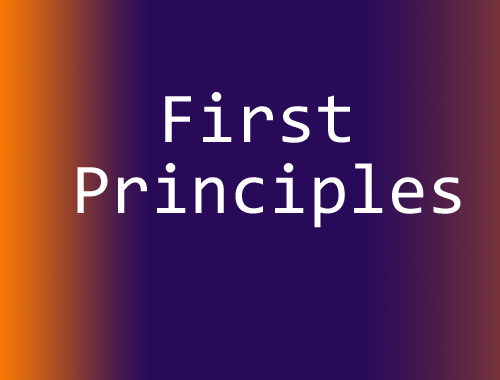
<style>
.page{position:relative;width:500px;height:380px;background:#290a59}
.page>*{position:absolute;margin:0}
.t1{font:71.7px "Consolas";color:#ffffff}
</style>
<div class="page">
<p class="t1" style="left:165px;top:92px;width:185px;height:51px">First</p>
<p class="t1" style="left:77px;top:163px;width:384px;height:65px">Principles</p>
</div>
